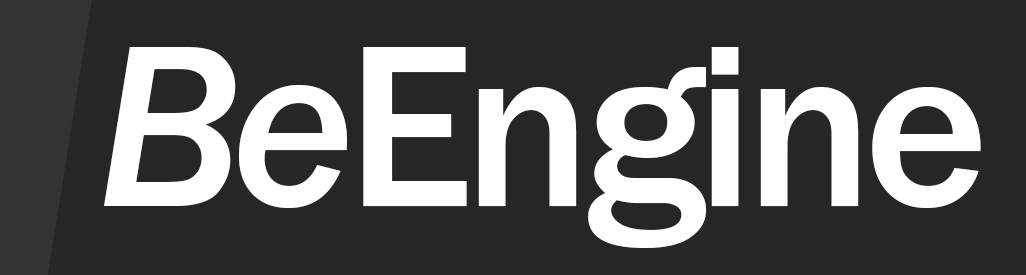
<style>
.page{position:relative;width:1026px;height:275px;background:#262528}
.page>*{position:absolute;margin:0}
.t1{font:237.5px "FranklinGothic-Medium";letter-spacing:-0.04em;color:#ffffff}
.t2{font:237.5px "FranklinGothic-MediumItalic";letter-spacing:-0.04em;color:#ffffff}
</style>
<div class="page">
<p class="t1" style="left:104px;top:47px;width:877px;height:201px"><span class="t2">Be</span>Engine</p>
</div>
